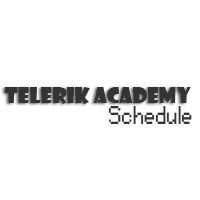
<style>
.page{position:relative;width:200px;height:200px;background:#ffffff}
.page>*{position:absolute;margin:0}
.t1{font:21px "ShowcardGothic-Reg";color:#343434}
.t2{font:24px "Small Fonts";color:#343434}
</style>
<div class="page">
<p class="t1" style="left:4px;top:87px;width:187px;height:17px">Telerik Academy</p>
<p class="t2" style="left:108px;top:106px;width:84px;height:18px">Schedule</p>
</div>
